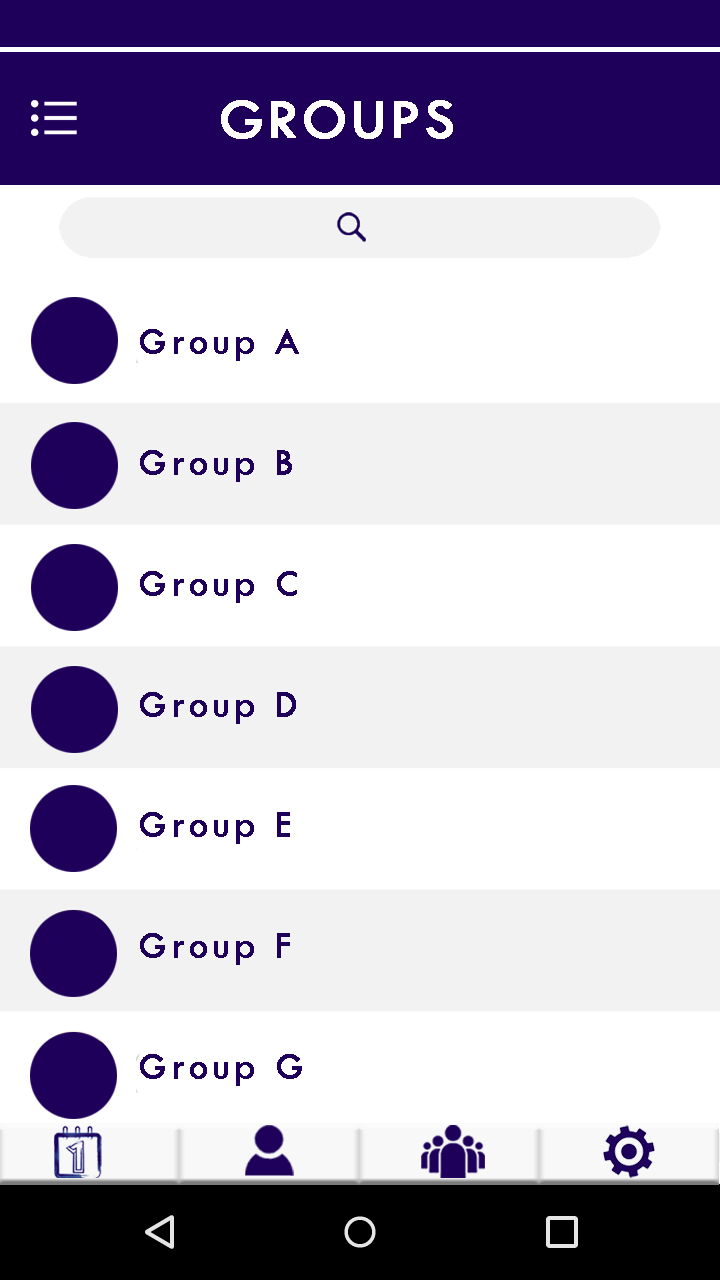
<style>
.page{position:relative;width:720px;height:1280px;background:#ffffff}
.page>*{position:absolute;margin:0}
.t1{font:58.3px "TwCenMT-Regular";letter-spacing:0.05em;color:#ffffff;text-transform:uppercase;font-weight:bold}
.t2{font:37.5px/120.8px "TwCenMT-Regular";letter-spacing:0.1em;color:#1e005a;font-weight:bold}
</style>
<div class="page">
<p class="t1" style="left:221px;top:100px;width:232px;height:39px">groups</p>
<p class="t2" style="left:140px;top:329px;width:162px;height:757px">Group A<br>Group B<br>Group C<br>Group D<br>Group E<br>Group F<br>Group G</p>
</div>
